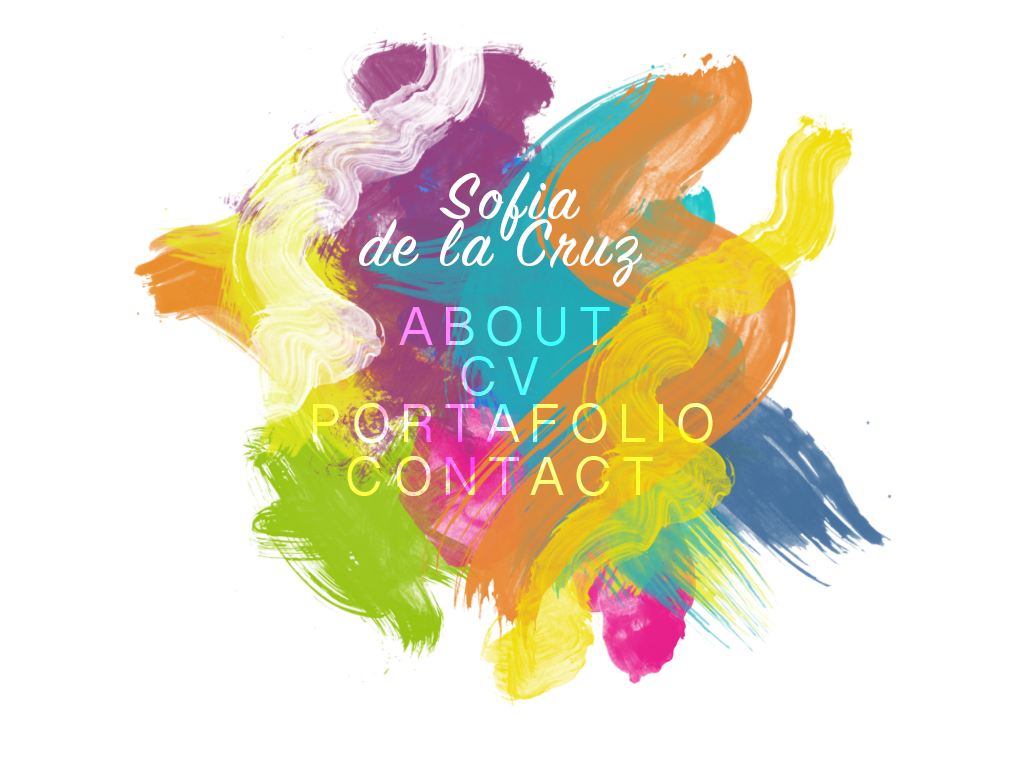
<style>
.page{position:relative;width:1024px;height:768px;background:#ffffff}
.page>*{position:absolute;margin:0}
.t1{font:72px/47px "SignPainter-HouseScript";letter-spacing:0.06em;color:#ffffff;font-variant:small-caps}
.t2{font:72px/50px "SignPainter-HouseScript";letter-spacing:0.06em;color:#ffffff;font-variant:small-caps}
.t3{font:72px "SinhalaSangamMN";letter-spacing:0.2em;font-variant:small-caps}
</style>
<div class="page">
<p class="t1" style="left:359px;top:172px;width:283px;height:115px;text-align:center"><span class="t2"> </span>Sofia<br>de la Cruz</p>
<p class="t3" style="left:399px;top:306px;width:211px;height:40px">about</p>
<p class="t3" style="left:461px;top:356px;width:78px;height:40px">cv</p>
<p class="t3" style="left:313px;top:403px;width:400px;height:40px">portafolio</p>
<p class="t3" style="left:347px;top:456px;width:306px;height:40px">contact</p>
</div>
